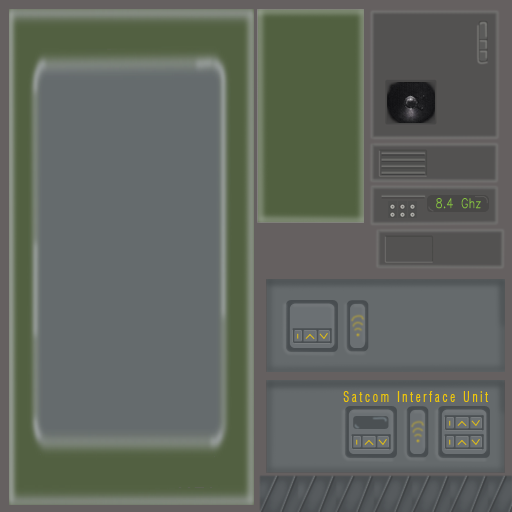
<style>
.page{position:relative;width:512px;height:512px;background:#656b6d}
.page>*{position:absolute;margin:0}
.t1{font:13px "RomanS_IV25";color:#87c540;scale:0.77 1}
.t2{font:14.3px "Swiss721BT-RomanCondensed";color:#efc70b;scale:0.77 1}
</style>
<div class="page">
<p class="t1" style="left:436px;top:198px;width:45px;height:11px">8.4 Ghz</p>
<p class="t2" style="left:343px;top:391px;width:145px;height:11px">S a t c o m   I n t e r f a c e   U n i t</p>
</div>
